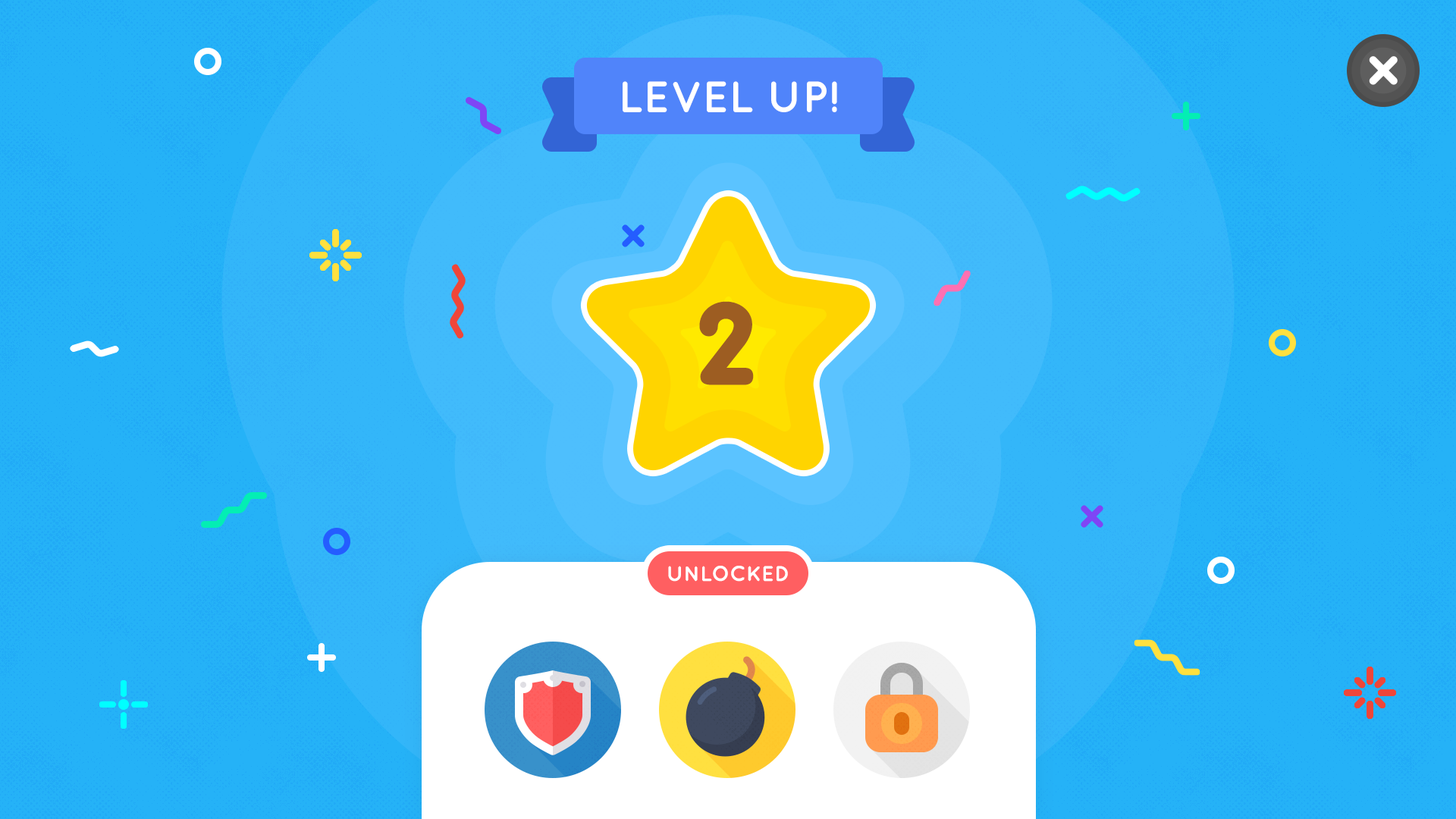
<style>
.page{position:relative;width:1456px;height:819px}
.page>*{position:absolute;margin:0}
.t1{font:43.8px "Quicksand-Bold";color:#ffffff;text-transform:uppercase}
.t2{font:108.1px "BPreplay-Bold";color:#9d5d22;scale:1.05 1}
.t3{font:21.2px "Quicksand-Bold";color:#ffffff;text-transform:uppercase}
</style>
<div class="page">
<p class="t1" style="left:623px;top:81px;width:214px;height:31px">LEVEL UP!</p>
<p class="t2" style="left:699px;top:301px;width:55px;height:84px">2</p>
<p class="t3" style="left:668px;top:566px;width:120px;height:16px">Unlocked</p>
</div>
